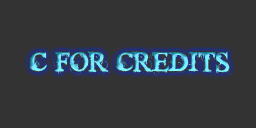
<style>
.page{position:relative;width:256px;height:128px;background:#333333}
.page>*{position:absolute;margin:0}
.t1{font:28px "TimesNewYorker"}
</style>
<div class="page">
<p class="t1" style="left:29px;top:50px;width:203px;height:26px">C FOR CREDITS</p>
</div>
